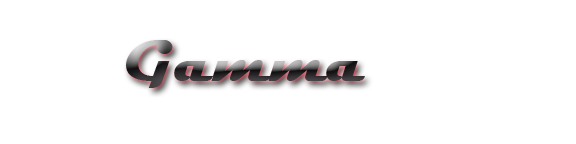
<style>
.page{position:relative;width:576px;height:144px;background:#ffffff}
.page>*{position:absolute;margin:0}
.t1{font:60px "Magneto-Bold"}
</style>
<div class="page">
<p class="t1" style="left:126px;top:40px;width:239px;height:48px">Gamma</p>
</div>
